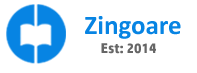
<style>
.page{position:relative;width:197px;height:73px;background:#ffffff}
.page>*{position:absolute;margin:0}
.t1{font:27px "Calibri-Bold";color:#0784e3}
.t2{font:14px "HPSimplified-Bold";color:#666666}
</style>
<div class="page">
<p class="t1" style="left:85px;top:16px;width:96px;height:23px">Zingoare</p>
<p class="t2" style="left:101px;top:43px;width:55px;height:11px">Est: 2014</p>
</div>
